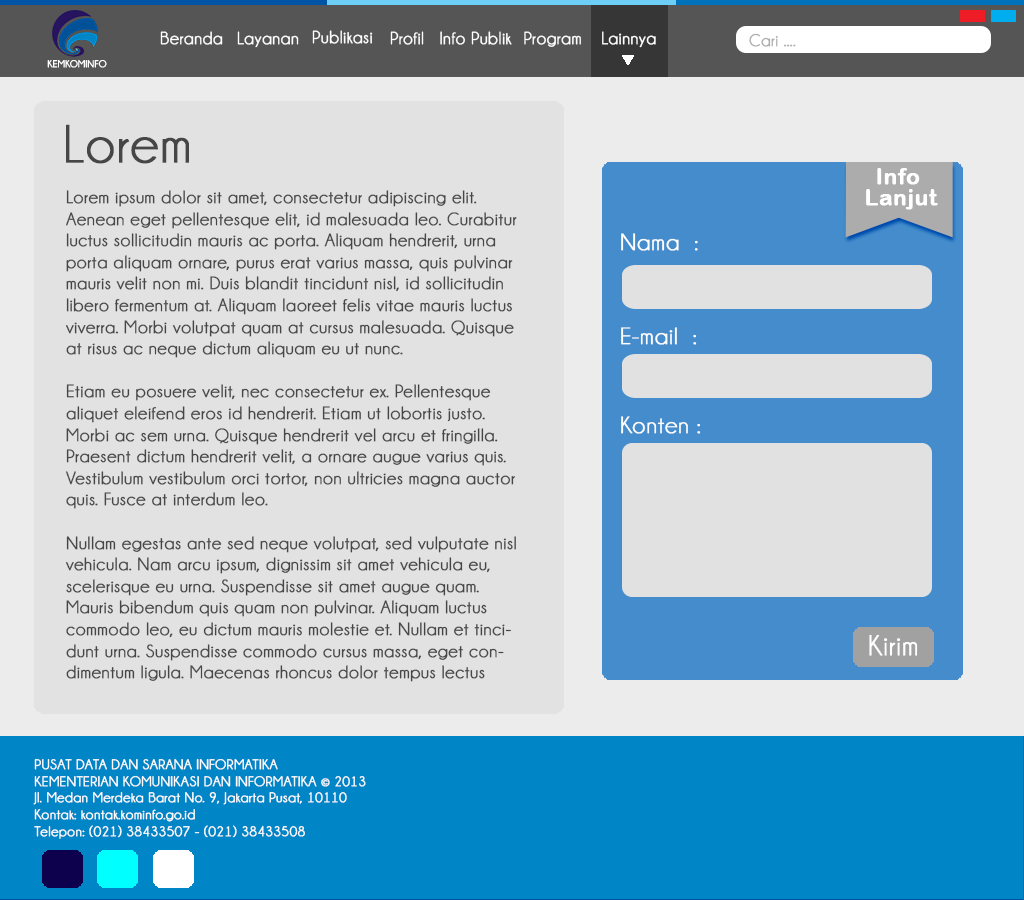
<style>
.page{position:relative;width:1024px;height:900px;background:#e2e2e2}
.page>*{position:absolute;margin:0}
.t1{font:17.7px "Champagne&Limousines";letter-spacing:0.025em;color:#ffffff;font-weight:bold}
.t2{font:17.3px "Champagne&Limousines";letter-spacing:0.025em;color:#acacac;font-weight:bold;scale:0.97 1}
.t3{font:9.7px "Champagne&Limousines";letter-spacing:0.025em;color:#fefefe;font-weight:bold}
.t4{font:54px "Champagne&Limousines";letter-spacing:0.025em;color:#464646;font-weight:bold}
.t5{font:21.7px "ArialRoundedMTBold";letter-spacing:0.025em;color:#ffffff;font-weight:bold}
.t6{font:18px "Champagne&Limousines";letter-spacing:0.025em;color:#464646;font-weight:bold}
.t7{font:24.1px "Champagne&Limousines";letter-spacing:0.025em;color:#ffffff;font-weight:bold}
.t8{font:28.9px "Champagne&Limousines";letter-spacing:0.025em;color:#ffffff;font-weight:bold}
.t9{font:14px "Champagne&Limousines";letter-spacing:0.025em;color:#ffffff;font-weight:bold}
</style>
<div class="page">
<p class="t1" style="left:312px;top:30px;width:61px;height:14px">Publikasi</p>
<p class="t1" style="left:160px;top:31px;width:63px;height:14px">Beranda</p>
<p class="t1" style="left:237px;top:31px;width:62px;height:17px">Layanan</p>
<p class="t1" style="left:390px;top:31px;width:34px;height:14px">Profil</p>
<p class="t1" style="left:440px;top:31px;width:72px;height:14px">Info Publik</p>
<p class="t1" style="left:524px;top:31px;width:57px;height:16px">Program</p>
<p class="t1" style="left:602px;top:31px;width:54px;height:17px">Lainnya</p>
<p class="t2" style="left:749px;top:33px;width:47px;height:14px">Cari ....</p>
<p class="t3" style="left:47px;top:60px;width:60px;height:8px">KEMKOMINFO</p>
<p class="t4" style="left:66px;top:124px;width:123px;height:40px">Lorem</p>
<p class="t5" style="left:877px;top:168px;width:43px;height:17px">Info</p>
<p class="t6" style="left:65px;top:190px;width:452px;height:492px">Lorem ipsum dolor sit amet, consectetur adipiscing elit. Aenean eget pellentesque elit, id malesuada leo. Curabitur luctus sollicitudin mauris ac porta. Aliquam hendrerit, urna porta aliquam ornare, purus erat varius massa, quis pulvinar mauris velit non mi. Duis blandit tincidunt nisl, id sollicitudin libero fermentum at. Aliquam laoreet felis vitae mauris luctus viverra. Morbi volutpat quam at cursus malesuada. Quisque at risus ac neque dictum aliquam eu ut nunc.<br><br>Etiam eu posuere velit, nec consectetur ex. Pellentesque aliquet eleifend eros id hendrerit. Etiam ut lobortis justo. Morbi ac sem urna. Quisque hendrerit vel arcu et fringilla. Praesent dictum hendrerit velit, a ornare augue varius quis. Vestibulum vestibulum orci tortor, non ultricies magna auctor quis. Fusce at interdum leo.<br><br>Nullam egestas ante sed neque volutpat, sed vulputate nisl vehicula. Nam arcu ipsum, dignissim sit amet vehicula eu, scelerisque eu urna. Suspendisse sit amet augue quam. Mauris bibendum quis quam non pulvinar. Aliquam luctus commodo leo, eu dictum mauris molestie et. Nullam et tincidunt urna. Suspendisse commodo cursus massa, eget condimentum ligula. Maecenas rhoncus dolor tempus lectus pretium ornare. Integer et eros egestas, blandit lorem sit amet, vulputate ante. Phasellus consectetur pretium vestibulum. Morbi vitae orci ipsum. Aenean fringilla purus urna, sit amet gravida nisi commodo in.<br><br>Donec finibus lacus sit amet placerat gravida. Phasellus et nisl ultrices, ornare nisl eu, finibus orci. Duis erat enim, fringilla vel massa et, fringilla tempus sem. Nullam auctor massa justo. Proin id tortor quis sem maximus convallis. Etiam mollis tellus leo, non hendrerit augue mattis at. Integer feugiat dapibus ante venenatis tincidunt. Aenean quis aliquet risus. Fusce sed diam iaculis, tincidunt sapien eu, dignissim est. Phasellus quis imperdiet neque. Fusce maximus tortor eros, in volutpat massa ullamcorper non. Nunc varius eros enim, sit amet laoreet ex facilisis sed.</p>
<p class="t5" style="left:866px;top:189px;width:72px;height:21px">Lanjut</p>
<p class="t7" style="left:621px;top:233px;width:77px;height:18px">Nama  :</p>
<p class="t7" style="left:621px;top:327px;width:76px;height:18px">E-mail  :</p>
<p class="t7" style="left:621px;top:416px;width:80px;height:18px">Konten :</p>
<p class="t8" style="left:869px;top:634px;width:49px;height:22px">Kirim</p>
<p class="t9" style="left:33px;top:759px;width:333px;height:80px">PUSAT DATA DAN SARANA INFORMATIKA<br>KEMENTERIAN KOMUNIKASI DAN INFORMATIKA © 2013<br>Jl. Medan Merdeka Barat No. 9, Jakarta Pusat, 10110<br>Kontak: kontak.kominfo.go.id<br>Telepon: (021) 38433507 - (021) 38433508</p>
</div>
